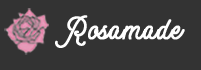
<style>
.page{position:relative;width:201px;height:70px;background:#333333}
.page>*{position:absolute;margin:0}
.t1{font:25.6px "MotherlineBold";color:#ffffff;font-weight:bold}
</style>
<div class="page">
<p class="t1" style="left:55px;top:15px;width:130px;height:33px">Rosamade</p>
</div>
